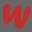
<style>
.page{position:relative;width:32px;height:32px;background:#676767}
.page>*{position:absolute;margin:0}
.t1{font:42.9px "ForteMT";color:#c52d2f}
</style>
<div class="page">
<p class="t1" style="left:2px;top:4px;width:29px;height:25px;rotate:9deg">w</p>
</div>
